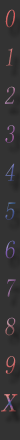
<style>
.page{position:relative;width:20px;height:440px;background:#333333}
.page>*{position:absolute;margin:0}
.t1{font:25.5px "SimSun";font-style:italic;scale:0.85 1}
.t2{font:39.4px "SimSun";font-style:italic;scale:0.85 1}
</style>
<div class="page">
<p class="t1" style="left:4px;top:9px;width:12px;height:365px;text-align:right">0<br>1<br>2<br>3<br>4<br>5<br>6<br>7<br>8<br>9</p>
<p class="t2" style="left:1px;top:394px;width:17px;height:18px">x</p>
</div>
